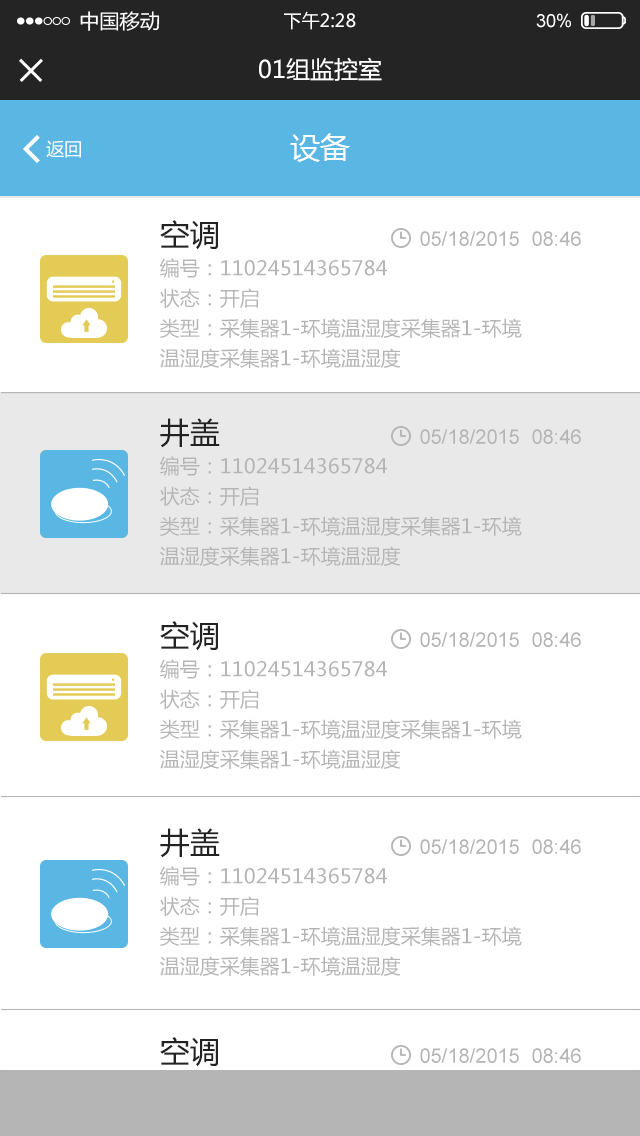
<style>
.page{position:relative;width:640px;height:1136px;background:#ffffff}
.page>*{position:absolute;margin:0}
.t1{font:18px "MicrosoftYaHei";color:#ffffff}
.t2{font:18px "ArialMT";color:#ffffff}
.t3{font:24px "MicrosoftYaHei";color:#ffffff}
.t4{font:30px "MicrosoftYaHei";color:#ffffff}
.t5{font:20px/30px "MicrosoftYaHei";color:#b5b5b5}
.t6{font:30px/30px "MicrosoftYaHei";color:#222222}
.t7{font:20px "ArialMT";color:#b5b5b5}
</style>
<div class="page">
<p class="t1" style="left:284px;top:11px;width:72px;height:19px">下午2:28</p>
<p class="t2" style="left:536px;top:13px;width:35px;height:15px">30%</p>
<p class="t3" style="left:259px;top:57px;width:123px;height:24px">01组监控室</p>
<p class="t4" style="left:290px;top:133px;width:60px;height:29px">设备</p>
<p class="t1" style="left:46px;top:140px;width:35px;height:18px">返回</p>
<p class="t5" style="left:160px;top:220px;width:362px;height:148px"><span class="t6">空调<br></span>编号：11024514365784<br>状态：开启<br>类型：采集器1-环境温湿度采集器1-环境<br>温湿度采集器1-环境温湿度</p>
<p class="t7" style="left:420px;top:231px;width:161px;height:15px">05/18/2015  08:46</p>
<p class="t5" style="left:160px;top:418px;width:362px;height:148px"><span class="t6">井盖<br></span>编号：11024514365784<br>状态：开启<br>类型：采集器1-环境温湿度采集器1-环境<br>温湿度采集器1-环境温湿度</p>
<p class="t7" style="left:420px;top:429px;width:161px;height:15px">05/18/2015  08:46</p>
<p class="t5" style="left:160px;top:621px;width:362px;height:148px"><span class="t6">空调<br></span>编号：11024514365784<br>状态：开启<br>类型：采集器1-环境温湿度采集器1-环境<br>温湿度采集器1-环境温湿度</p>
<p class="t7" style="left:420px;top:632px;width:161px;height:15px">05/18/2015  08:46</p>
<p class="t5" style="left:160px;top:828px;width:362px;height:148px"><span class="t6">井盖<br></span>编号：11024514365784<br>状态：开启<br>类型：采集器1-环境温湿度采集器1-环境<br>温湿度采集器1-环境温湿度</p>
<p class="t7" style="left:420px;top:839px;width:161px;height:15px">05/18/2015  08:46</p>
<p class="t7" style="left:420px;top:1048px;width:161px;height:15px">05/18/2015  08:46</p>
</div>
